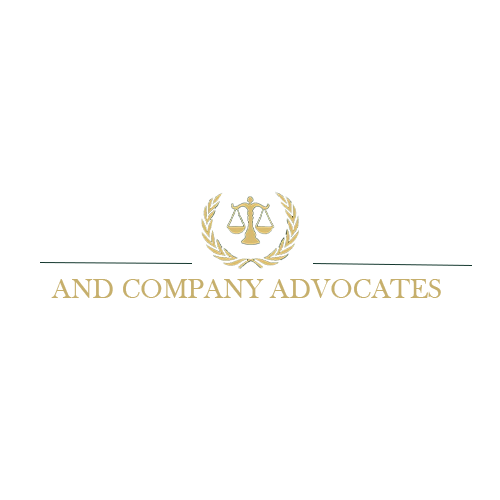
<style>
.page{position:relative;width:500px;height:500px;background:#ffffff}
.page>*{position:absolute;margin:0}
.t1{font:28px "BaskOldFace";color:#c6af6c}
</style>
<div class="page">
<p class="t1" style="left:51px;top:279px;width:390px;height:19px">AND COMPANY ADVOCATES</p>
</div>
